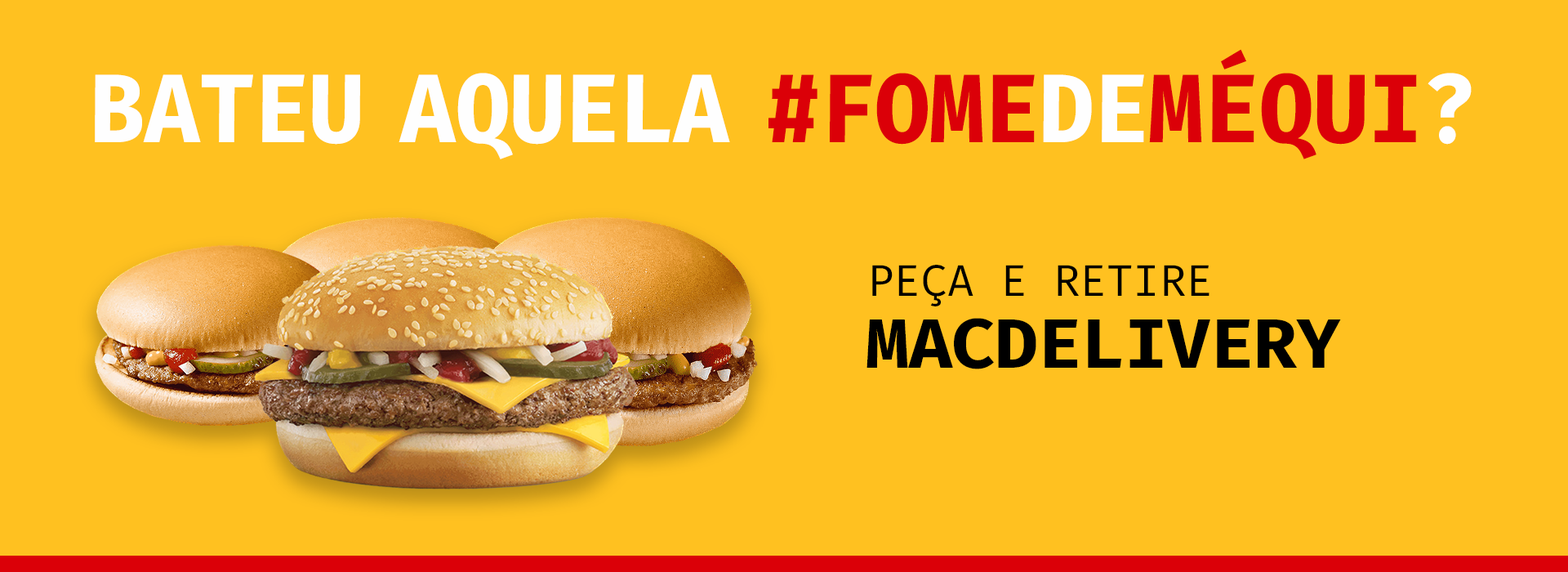
<style>
.page{position:relative;width:1568px;height:572px;background:#ffc120}
.page>*{position:absolute;margin:0}
.t1{font:94.6px "FiraCode-Bold";color:#fefefe;scale:0.94 1}
.t2{font:94.6px "FiraCode-Bold";color:#db0008;scale:0.94 1}
.t3{font:43.2px "FiraCode-Regular";color:#000000}
.t4{font:67.9px "FiraCode-Bold";color:#000000;scale:1.03 1}
</style>
<div class="page">
<p class="t1" style="left:95px;top:49px;width:1377px;height:110px">BATEU AQUELA <span class="t2">#FOME</span>DE<span class="t2">MÉQUI</span>?</p>
<p class="t3" style="left:872px;top:265px;width:337px;height:41px">PEÇA E RETIRE</p>
<p class="t4" style="left:866px;top:318px;width:475px;height:51px">MACDELIVERY</p>
</div>
